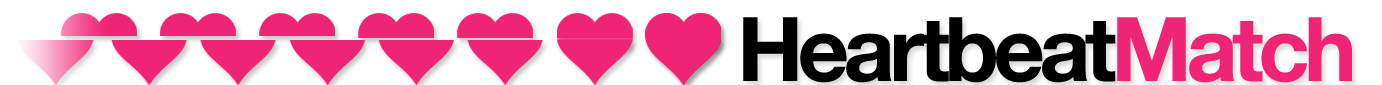
<style>
.page{position:relative;width:1382px;height:85px;background:#ffffff}
.page>*{position:absolute;margin:0}
.t1{font:24px "HelveticaNeue-UltraLight";color:#000000;font-style:italic}
.t2{font:89px "HelveticaNeue-Bold";letter-spacing:-0.06em;color:#000000}
.t3{font:89px "HelveticaNeue-Bold";letter-spacing:-0.06em;color:#f02475}
</style>
<div class="page">
<p class="t1" style="left:743px;top:17px;width:609px;height:66px;text-align:center"><span class="t2">Heartbeat</span><span class="t3">Match<br><br></span>A MusicHackDay SF Hack</p>
</div>
